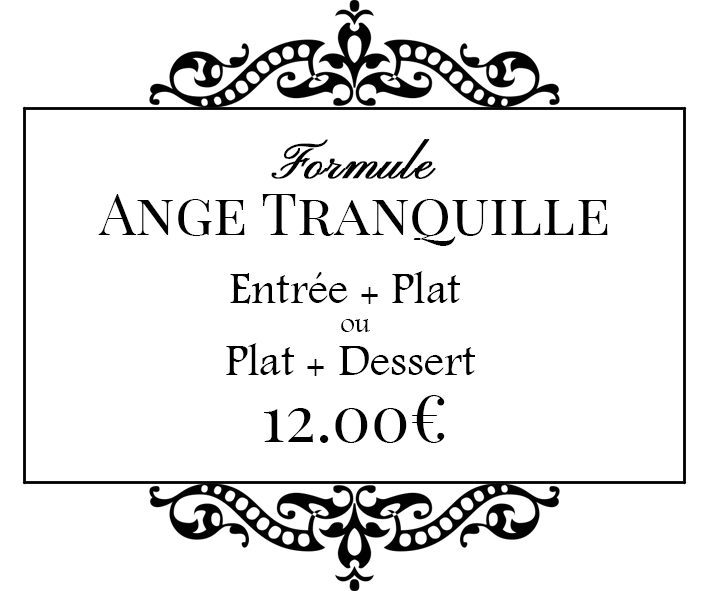
<style>
.page{position:relative;width:709px;height:591px;background:#ffffff}
.page>*{position:absolute;margin:0}
.t1{font:50px "PinyonScript";color:#010101;font-weight:bold}
.t2{font:58.3px "PlayfairDisplaySC-Regular";color:#000000}
.t3{font:45.8px "Andalus";color:#000000}
.t4{font:29.2px "Andalus";color:#000000}
.t5{font:64.6px "PlayfairDisplaySC-Regular";color:#000000}
</style>
<div class="page">
<p class="t1" style="left:271px;top:139px;width:165px;height:40px">Formule</p>
<p class="t2" style="left:98px;top:194px;width:510px;height:52px">Ange Tranquille</p>
<p class="t3" style="left:230px;top:271px;width:230px;height:33px">Entrée + Plat</p>
<p class="t4" style="left:341px;top:319px;width:29px;height:13px">ou</p>
<p class="t3" style="left:226px;top:343px;width:249px;height:33px">Plat + Dessert</p>
<p class="t5" style="left:264px;top:395px;width:181px;height:48px">12.00€</p>
</div>
